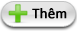
<style>
.page{position:relative;width:77px;height:31px}
.page>*{position:absolute;margin:0}
.t1{font:14.7px "Calibri";color:#000000;font-weight:bold}
</style>
<div class="page">
<p class="t1" style="left:32px;top:8px;width:35px;height:11px">Thêm</p>
</div>
